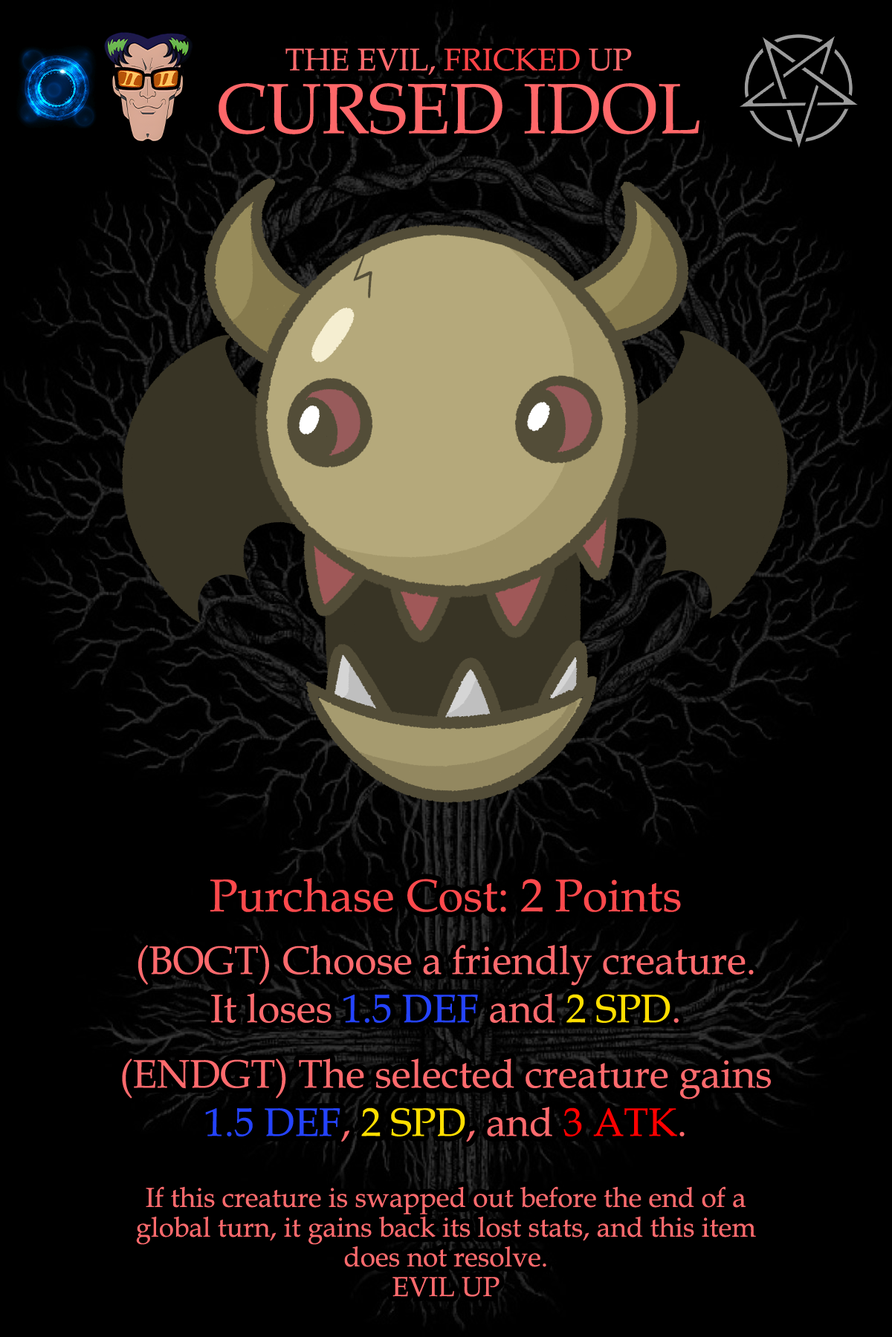
<style>
.page{position:relative;width:892px;height:1337px;background:#000000}
.page>*{position:absolute;margin:0}
.t1{font:121.9px/40.1px "BookAntiqua";color:#ff6769}
.t2{font:53.5px/40.1px "BookAntiqua";color:#ff6a6d}
.t3{font:53.5px/40.1px "BookAntiqua";color:#ff4346}
.t4{font:47.1px/29.7px "BookAntiqua";color:#ff6a6d}
.t5{font:78.6px/48.3px "BookAntiqua";color:#ff494c}
.t6{font:68.1px/66.1px "BookAntiqua";color:#ff6a6d}
.t7{font:68.1px/48.3px "BookAntiqua";color:#ff6a6d}
.t8{font:68.1px/48.3px "BookAntiqua";color:#2443ff}
.t9{font:68.1px/48.3px "BookAntiqua";color:#ffde00}
.t10{font:68.1px/65.4px "BookAntiqua";color:#ff6a6d}
.t11{font:68.1px/48.3px "BookAntiqua";color:#ff0000}
.t12{font:47.1px "BookAntiqua";color:#ff6a6d}
</style>
<div class="page">
<p class="t1" style="left:218px;top:48px;width:481px;height:86px;text-align:center"><span class="t2">THE EVIL, </span><span class="t3">FRICKED </span><span class="t2">UP<br></span>CURSED IDOL</p>
<p class="t4" style="left:122px;top:878px;width:648px;height:390px;text-align:center"><span class="t5">Purchase Cost: 2 Points<br></span><span class="t6">(BOGT) Choose a friendly creature. </span><span class="t7">It loses </span><span class="t8">1.5 DEF</span><span class="t7"> and </span><span class="t9">2 SPD</span><span class="t7">.<br></span><span class="t10">(ENDGT) The selected creature </span><span class="t7">gains </span><span class="t8">1.5 DEF</span><span class="t7">, </span><span class="t9">2 SPD</span><span class="t7">, and </span><span class="t11">3 ATK</span><span class="t7">.<br><br></span>If this creature is swapped out before the end of a global turn, it gains back its lost stats, and this item does not resolve.</p>
<p class="t12" style="left:392px;top:1277px;width:107px;height:20px">EVIL UP</p>
</div>
